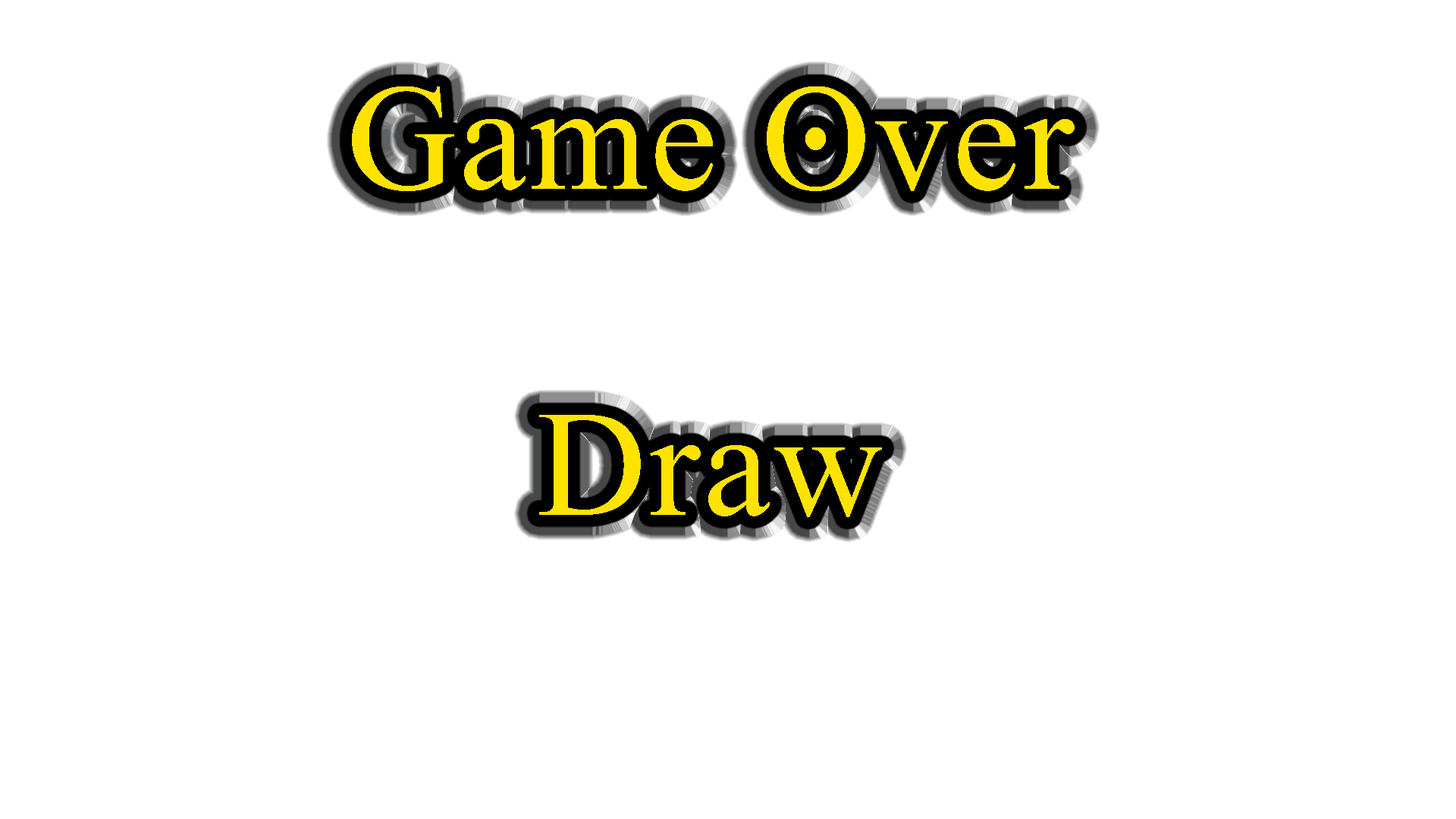
<style>
.page{position:relative;width:1456px;height:819px;background:#ffffff}
.page>*{position:absolute;margin:0}
.t1{font:151.7px "GhostTheory";letter-spacing:0.02em;color:#fee300}
</style>
<div class="page">
<p class="t1" style="left:352px;top:86px;width:723px;height:105px">Game Over</p>
<p class="t1" style="left:539px;top:415px;width:343px;height:102px">Draw</p>
</div>
